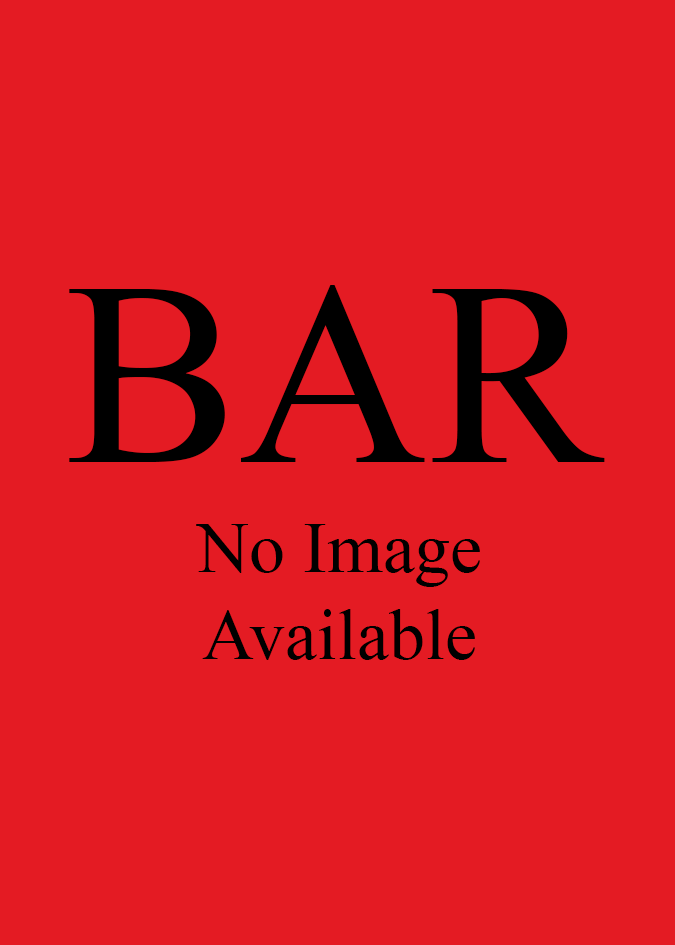
<style>
.page{position:relative;width:675px;height:945px;background:#e41b23}
.page>*{position:absolute;margin:0}
.t1{font:261px "TimesNewRomanPSMT";color:#000000}
.t2{font:72px "TimesNewRomanPSMT";color:#000000}
</style>
<div class="page">
<p class="t1" style="left:69px;top:285px;width:536px;height:177px">BAR</p>
<p class="t2" style="left:196px;top:524px;width:284px;height:136px;text-align:center">No Image<br>Available</p>
</div>
